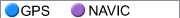
<style>
.page{position:relative;width:180px;height:18px;background:#ffffff}
.page>*{position:absolute;margin:0}
.t1{font:14px "ArialMT";color:#000000}
</style>
<div class="page">
<p class="t1" style="left:21px;top:5px;width:29px;height:11px">GPS</p>
<p class="t1" style="left:89px;top:5px;width:41px;height:11px">NAVIC</p>
</div>
